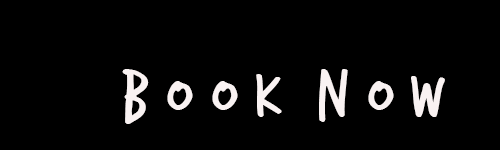
<style>
.page{position:relative;width:500px;height:150px;background:#000000}
.page>*{position:absolute;margin:0}
.t1{font:70px "TrashHand";color:#f9f2f2}
.t2{font:40px "LetterGothicStd";color:#f9f2f2}
</style>
<div class="page">
<p class="t1" style="left:122px;top:69px;width:323px;height:55px"><span class="t2"><br></span>B o o k  N O w</p>
</div>
